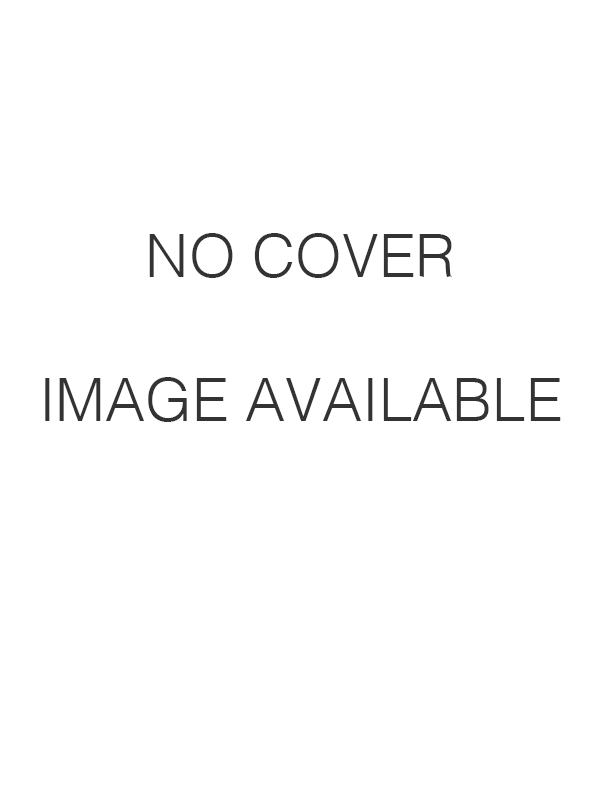
<style>
.page{position:relative;width:600px;height:800px;background:#ffffff}
.page>*{position:absolute;margin:0}
.t1{font:60px "Helvetica-Light";color:#333333}
</style>
<div class="page">
<p class="t1" style="left:45px;top:233px;width:516px;height:189px;text-align:center">NO COVER<br><br>IMAGE AVAILABLE</p>
</div>
